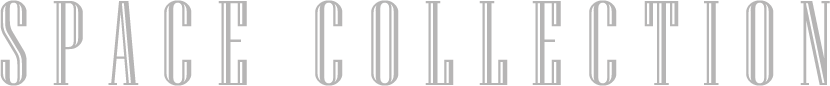
<style>
.page{position:relative;width:830px;height:86px;background:#ffffff}
.page>*{position:absolute;margin:0}
.t1{font:120px "NiagaraEngraved-Reg";letter-spacing:0.2em;color:#b6b5b5;text-transform:uppercase;scale:0.94 1}
</style>
<div class="page">
<p class="t1" style="left:0px;top:0px;width:830px;height:86px">SPACE COLLECTION</p>
</div>
